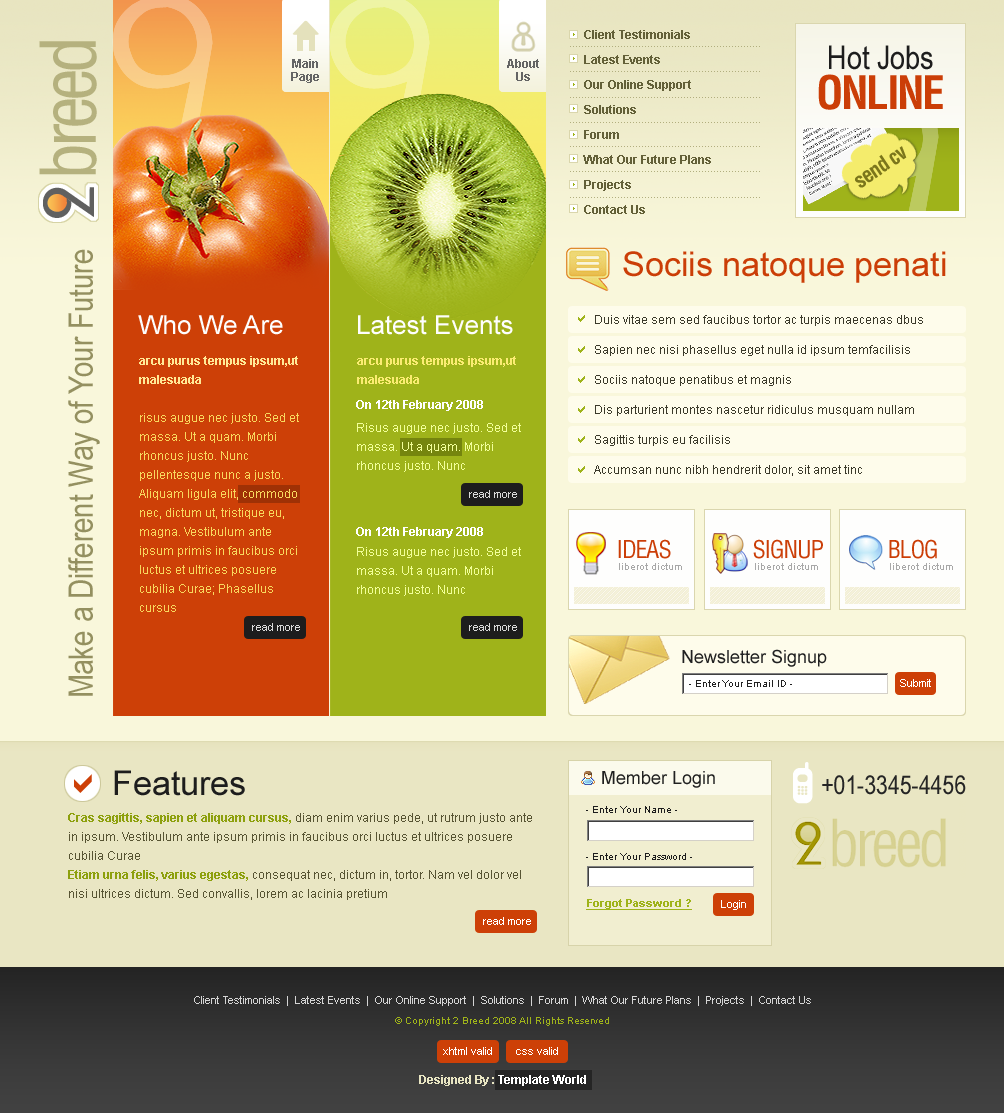
<style>
.page{position:relative;width:1004px;height:1113px}
.page>*{position:absolute;margin:0}
.t1{font:12px/25px "Arial-BoldMT";color:#636038}
.t2{font:75px "Helvetica-Condensed";letter-spacing:-0.075em;color:#b5b17e}
.t3{font:33px "ArialNarrow";color:#1d1d1d}
.t4{font:12px/13px "Arial-BoldMT";color:#646464}
.t5{font:45px "Helvetica-Condensed-Bold";letter-spacing:-0.05em;color:#cb3e07;text-transform:uppercase}
.t6{font:21px "Helvetica-Condensed-Bold";letter-spacing:-0.05em;color:#7b761b}
.t7{font:34px "ArialNarrow";color:#949060}
.t8{font:34px "ArialMT";color:#cb3e07}
.t9{font:26px "ArialMT";color:#fefefe}
.t10{font:12px/30px "ArialMT";color:#3b3a2b}
.t11{font:12px/19px "ArialMT";color:#f8d85e}
.t12{font:12px/19px "Arial-BoldMT";color:#ffe996}
.t13{font:12px/19px "Arial-BoldMT";color:#fbec73}
.t14{font:12px "Arial-BoldMT";color:#ffffff}
.t15{font:12px/19px "ArialMT";color:#f2ff9a}
.t16{font:11px "ArialMT";color:#d9d9d9}
.t17{font:24px "Helvetica-Condensed";letter-spacing:-0.05em;color:#cb3e07;text-transform:uppercase}
.t18{font:10px "ArialMT";color:#a8a8a8}
.t19{font:18px "ArialMT";color:#212121}
.t20{font:10px "ArialMT";color:#212121}
.t21{font:11px "ArialMT";color:#ffffff}
.t22{font:34px "ArialMT";color:#1d1d1d}
.t23{font:45px "Cellpic";color:#ffffff}
.t24{font:26px "ArialNarrow";color:#252525}
.t25{font:10px "ArialMT";color:#1d1d1d}
.t26{font:12px/19px "ArialMT";color:#575433}
.t27{font:12px/19px "Arial-BoldMT";color:#8da00d}
.t28{font:11px "Arial-BoldMT";color:#9fb31a;text-decoration:underline}
.t29{font:11px "ArialMT";color:#d5d5d5}
.t30{font:10px "ArialMT";color:#9fb31a}
.t31{font:12px "Arial-BoldMT";color:#e9e6c3}
</style>
<div class="page">
<p class="t1" style="left:583px;top:30px;width:128px;height:184px">Client Testimonials<br>Latest Events<br>Our Online Support<br>Solutions<br>Forum<br>What Our Future Plans<br>Projects<br>Contact Us</p>
<p class="t2" style="left:39px;top:41px;width:58px;height:134px;rotate:-90deg">breed</p>
<p class="t3" style="left:829px;top:45px;width:104px;height:25px">Hot Jobs</p>
<p class="t4" style="left:291px;top:59px;width:28px;height:24px;text-align:center">Main<br>Page</p>
<p class="t4" style="left:507px;top:59px;width:32px;height:22px;text-align:center">About<br>Us</p>
<p class="t5" style="left:818px;top:74px;width:125px;height:36px">online</p>
<p class="t6" style="left:855px;top:146px;width:52px;height:42px;rotate:-34deg">send cv</p>
<p class="t7" style="left:68px;top:249px;width:32px;height:447px;rotate:-90deg">Make a Different Way of Your Future</p>
<p class="t8" style="left:623px;top:251px;width:323px;height:32px">Sociis natoque penati</p>
<p class="t9" style="left:138px;top:315px;width:145px;height:20px">Who We Are</p>
<p class="t9" style="left:358px;top:315px;width:155px;height:20px">Latest Events</p>
<p class="t10" style="left:594px;top:315px;width:329px;height:161px">Duis vitae sem sed faucibus tortor ac turpis maecenas dbus <br>Sapien nec nisi phasellus eget nulla id ipsum temfacilisis<br>Sociis natoque penatibus et magnis <br>Dis parturient montes nascetur ridiculus musquam nullam <br>Sagittis turpis eu facilisis <br>Accumsan nunc nibh hendrerit dolor, sit amet tinc</p>
<p class="t11" style="left:139px;top:356px;width:160px;height:256px"><span class="t12">arcu purus tempus ipsum,ut malesuada <br><br></span>risus augue nec justo. Sed et massa. Ut a quam. Morbi rhoncus justo. Nunc pellentesque nunc a justo. Aliquam ligula elit, commodo nec, dictum ut, tristique eu, magna. Vestibulum ante ipsum primis in faucibus orci luctus et ultrices posuere cubilia Curae; Phasellus cursus</p>
<p class="t13" style="left:357px;top:356px;width:159px;height:28px">arcu purus tempus ipsum,ut malesuada</p>
<p class="t14" style="left:356px;top:400px;width:127px;height:11px">On 12th February 2008</p>
<p class="t15" style="left:357px;top:423px;width:164px;height:49px">Risus augue nec justo. Sed et massa. Ut a quam. Morbi rhoncus justo. Nunc</p>
<p class="t16" style="left:469px;top:490px;width:48px;height:8px">read more</p>
<p class="t14" style="left:356px;top:527px;width:127px;height:11px">On 12th February 2008</p>
<p class="t17" style="left:618px;top:539px;width:53px;height:20px">ideas</p>
<p class="t17" style="left:753px;top:539px;width:70px;height:20px">signup</p>
<p class="t17" style="left:889px;top:539px;width:48px;height:20px">blog</p>
<p class="t15" style="left:357px;top:547px;width:164px;height:49px">Risus augue nec justo. Sed et massa. Ut a quam. Morbi rhoncus justo. Nunc</p>
<p class="t18" style="left:619px;top:563px;width:63px;height:7px">liberot dictum</p>
<p class="t18" style="left:755px;top:563px;width:63px;height:7px">liberot dictum</p>
<p class="t18" style="left:890px;top:563px;width:63px;height:7px">liberot dictum</p>
<p class="t16" style="left:252px;top:623px;width:48px;height:8px">read more</p>
<p class="t16" style="left:469px;top:623px;width:48px;height:8px">read more</p>
<p class="t19" style="left:682px;top:649px;width:145px;height:18px">Newsletter Signup</p>
<p class="t20" style="left:689px;top:680px;width:103px;height:7px">- Enter Your Email ID -</p>
<p class="t21" style="left:900px;top:679px;width:31px;height:8px">Submit</p>
<p class="t22" style="left:114px;top:770px;width:131px;height:26px">Features</p>
<p class="t19" style="left:602px;top:771px;width:113px;height:17px">Member Login</p>
<p class="t23" style="left:793px;top:762px;width:20px;height:42px">b</p>
<p class="t24" style="left:822px;top:775px;width:144px;height:20px">+01-3345-4456</p>
<p class="t25" style="left:586px;top:806px;width:91px;height:7px">- Enter Your Name -</p>
<p class="t26" style="left:68px;top:813px;width:464px;height:87px"><span class="t27">Cras sagittis, sapien et aliquam cursus,</span> diam enim varius pede, ut rutrum justo ante in ipsum. Vestibulum ante ipsum primis in faucibus orci luctus et ultrices posuere cubilia Curae<br><span class="t27">Etiam urna felis, varius egestas,</span> consequat nec, dictum in, tortor. Nam vel dolor vel nisi ultrices dictum. Sed convallis, lorem ac lacinia pretium</p>
<p class="t25" style="left:586px;top:853px;width:106px;height:7px">- Enter Your Password -</p>
<p class="t28" style="left:586px;top:899px;width:106px;height:11px">Forgot Password ?</p>
<p class="t21" style="left:721px;top:900px;width:25px;height:10px">Login</p>
<p class="t21" style="left:483px;top:917px;width:48px;height:8px">read more</p>
<p class="t29" style="left:194px;top:996px;width:617px;height:10px">Client Testimonials  |  Latest Events  |  Our Online Support  |  Solutions  |  Forum  |  What Our Future Plans  |  Projects  |  Contact Us</p>
<p class="t30" style="left:395px;top:1017px;width:214px;height:9px">© Copyright 2 Breed 2008 All Rights Reserved</p>
<p class="t21" style="left:443px;top:1047px;width:49px;height:8px">xhtml valid</p>
<p class="t21" style="left:516px;top:1047px;width:42px;height:8px">css valid</p>
<p class="t14" style="left:419px;top:1075px;width:167px;height:11px"><span class="t31">Designed By : </span>Template World</p>
</div>
